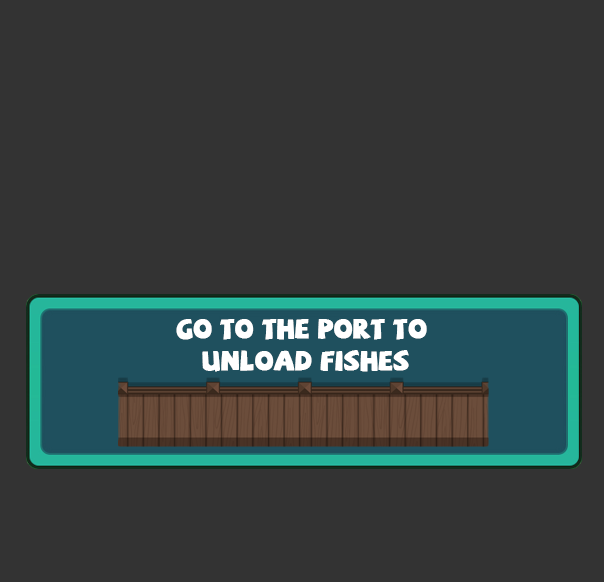
<style>
.page{position:relative;width:604px;height:582px;background:#333333}
.page>*{position:absolute;margin:0}
.t1{font:27.3px "SVN-SAF";color:#ffffff;font-weight:bold}
</style>
<div class="page">
<p class="t1" style="left:176px;top:319px;width:251px;height:53px;text-align:center">Go to the port to <br>unload fishes</p>
</div>
